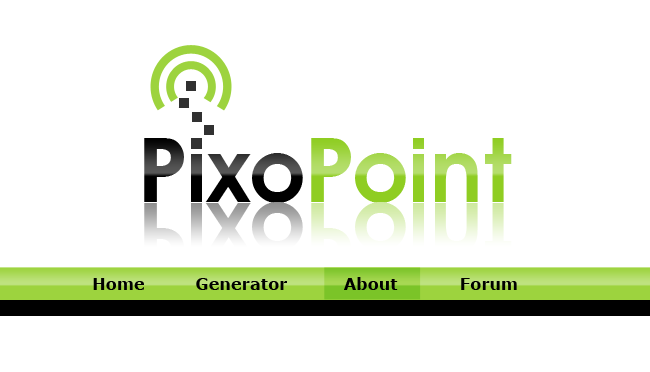
<style>
.page{position:relative;width:650px;height:372px;background:#ffffff}
.page>*{position:absolute;margin:0}
.t1{font:90px "AvantGardeITCbyBT-Demi";letter-spacing:0.01em}
.t2{font:16px "Verdana-Bold";letter-spacing:0.01em;color:#000000}
</style>
<div class="page">
<p class="t1" style="left:144px;top:138px;width:368px;height:65px">PixoPoint</p>
<p class="t1" style="left:144px;top:202px;width:368px;height:65px">PixoPoint</p>
<p class="t2" style="left:93px;top:277px;width:424px;height:13px">Home         Generator          About           Forum</p>
</div>
